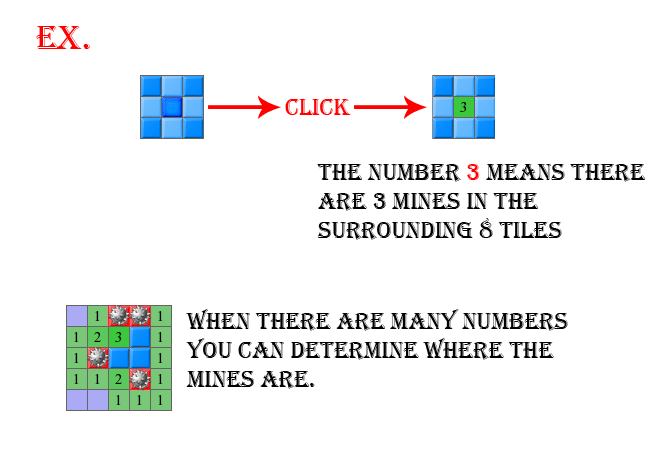
<style>
.page{position:relative;width:650px;height:450px;background:#ffffff}
.page>*{position:absolute;margin:0}
.t1{font:35px "Algerian";color:#ff0000}
.t2{font:24px "Algerian";color:#ff0000}
.t3{font:24px "Algerian";color:#000000}
</style>
<div class="page">
<p class="t1" style="left:36px;top:26px;width:54px;height:23px">eX.</p>
<p class="t2" style="left:285px;top:99px;width:66px;height:16px">CLICK</p>
<p class="t3" style="left:317px;top:164px;width:329px;height:76px">tHE NUMBER <span class="t2">3</span> MEANS THERE<br>ARE 3 MINES IN THE <br>SURROUNDING 8 TILES</p>
<p class="t3" style="left:186px;top:309px;width:382px;height:80px">when there are many numbers<br>you can determine where the<br>mines are.</p>
</div>
